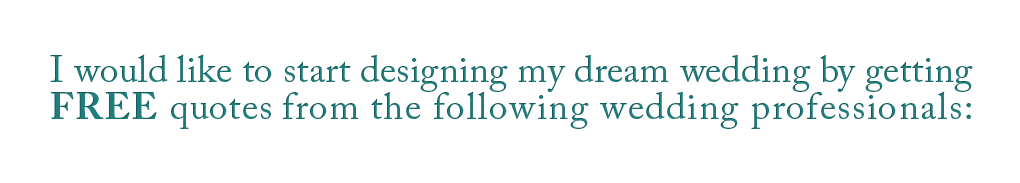
<style>
.page{position:relative;width:1020px;height:183px;background:#ffffff}
.page>*{position:absolute;margin:0}
.t1{font:37.6px/37.6px "ACaslonPro-Regular";letter-spacing:0.005em;color:#1f7e7e}
.t2{font:37.6px/37.6px "ACaslonPro-Regular";letter-spacing:0.025em;color:#1f7e7e}
.t3{font:37.6px/37.6px "ACaslonPro-Bold";letter-spacing:0.04em;color:#1f7e7e}
.t4{font:37.6px/37.6px "ACaslonPro-Regular";letter-spacing:0.04em;color:#1f7e7e}
</style>
<div class="page">
<p class="t1" style="left:50px;top:54px;width:923px;height:75px">I would like to start designing my dream wedding by gettin<span class="t2">g </span><span class="t3">FREE</span><span class="t4"> quotes from the following wedding professionals:</span></p>
</div>
